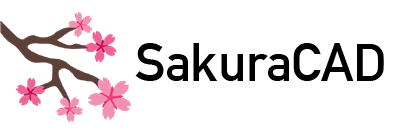
<style>
.page{position:relative;width:395px;height:132px;background:#ffffff}
.page>*{position:absolute;margin:0}
.t1{font:52.5px "AlteDIN1451Mittelschrift";color:#000000}
</style>
<div class="page">
<p class="t1" style="left:135px;top:43px;width:249px;height:38px">SakuraCAD</p>
</div>
